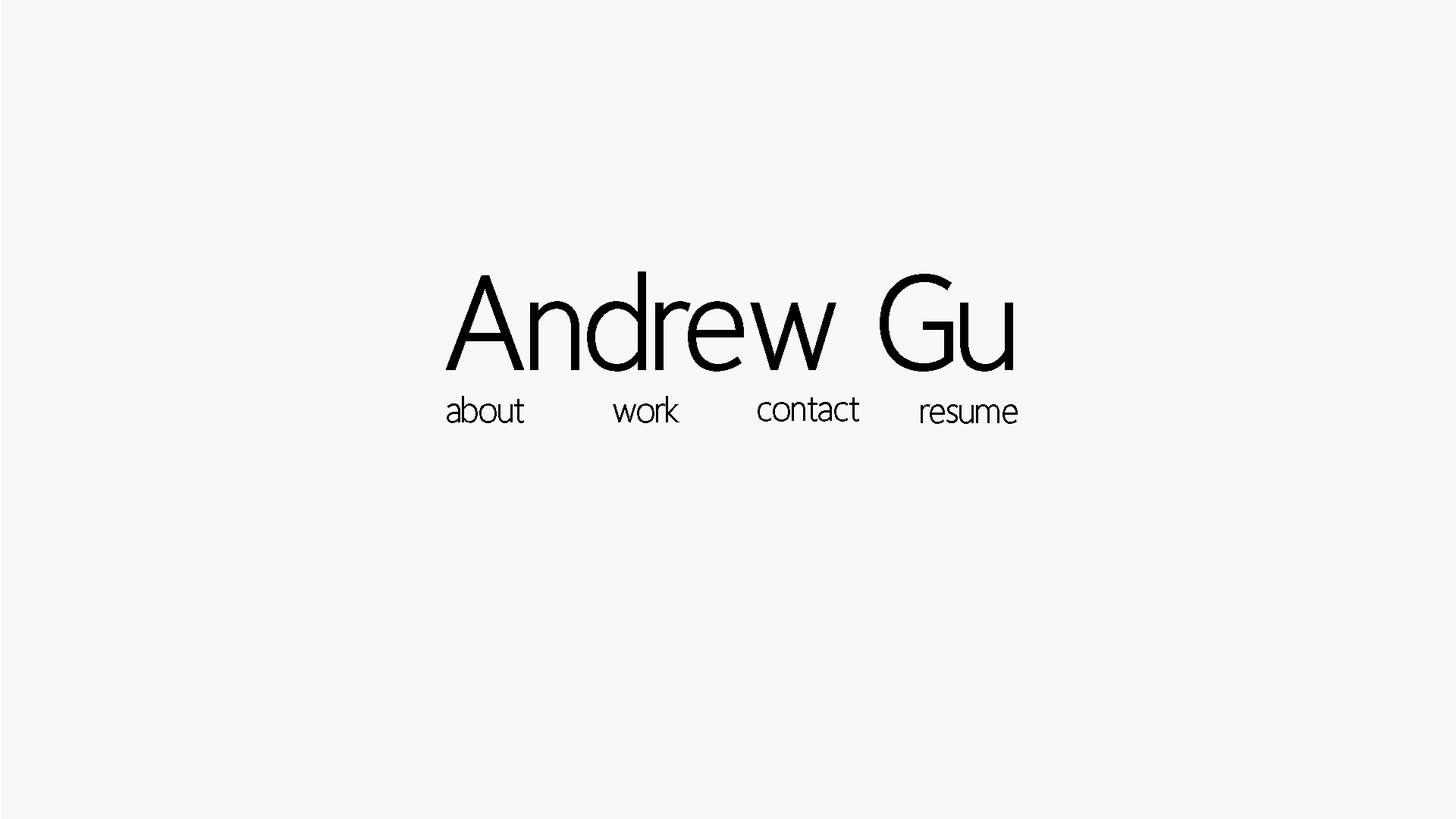
<style>
.page{position:relative;width:1456px;height:819px;background:#f8f8f8}
.page>*{position:absolute;margin:0}
.t1{font:134.9px "HomizioNova";color:#000000}
.t2{font:36.4px "HomizioNova";color:#000000}
</style>
<div class="page">
<p class="t1" style="left:446px;top:271px;width:567px;height:101px">Andrew Gu</p>
<p class="t2" style="left:447px;top:396px;width:77px;height:27px">about</p>
<p class="t2" style="left:613px;top:396px;width:66px;height:27px">work</p>
<p class="t2" style="left:758px;top:397px;width:101px;height:25px">contact</p>
<p class="t2" style="left:921px;top:404px;width:97px;height:20px">resume</p>
</div>
